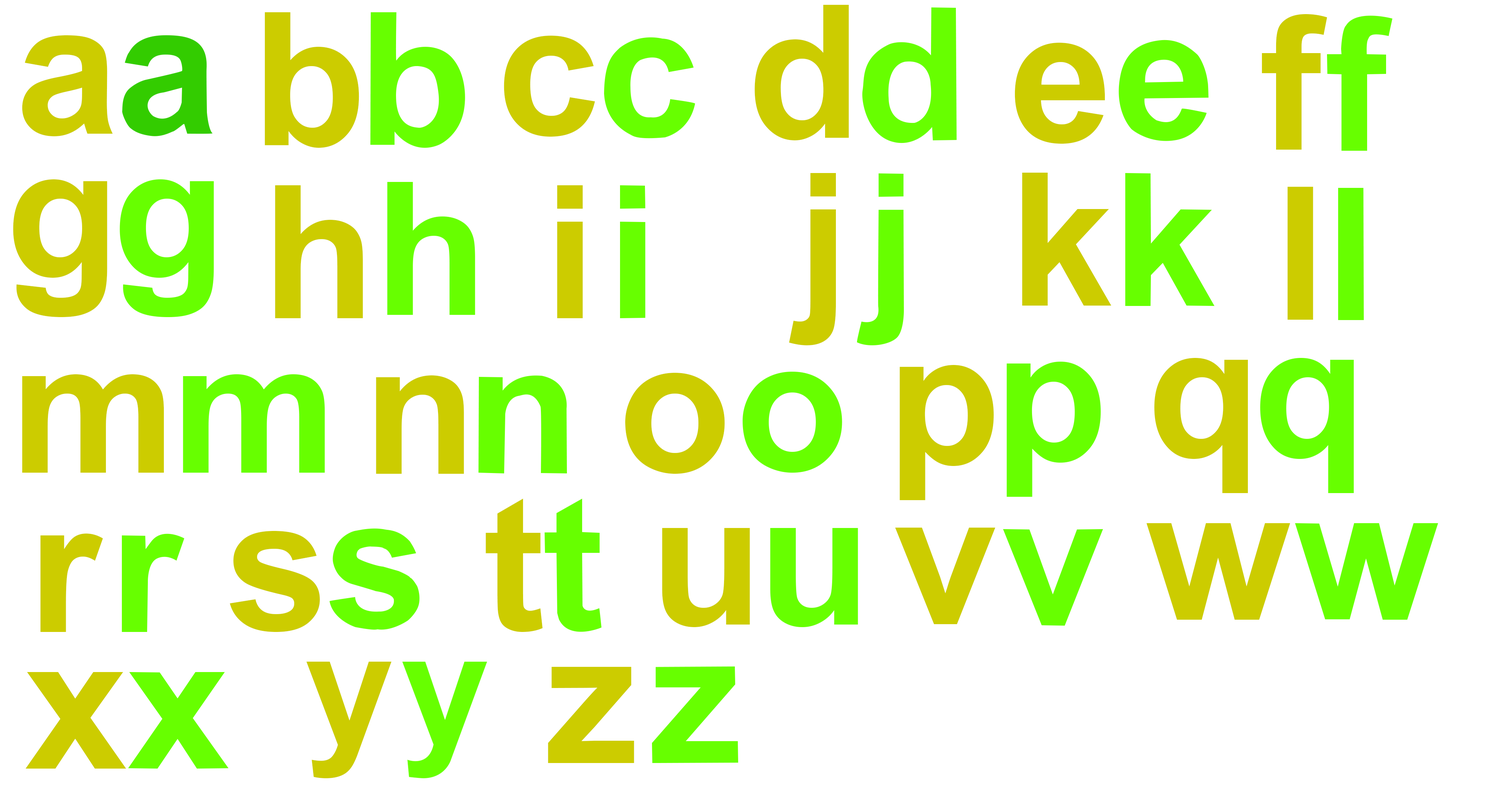
<style>
.page{position:relative;width:1486px;height:802px;background:#ffffff}
.page>*{position:absolute;margin:0}
.t1{font:185.8px "Arial-BoldMT";color:#cccc00}
.t2{font:159.2px "Arial-BoldMT";color:#cccc00}
.t3{font:185.5px "Arial-BoldMT";color:#cccc00}
</style>
<div class="page">
<p class="t1" style="left:755px;top:5px;width:94px;height:135px">d</p>
<p class="t1" style="left:265px;top:12px;width:94px;height:136px">b</p>
<p class="t1" style="left:1262px;top:14px;width:65px;height:136px">f</p>
<p class="t1" style="left:22px;top:35px;width:91px;height:101px">a</p>
<p class="t1" style="left:504px;top:36px;width:91px;height:101px">c</p>
<p class="t1" style="left:1015px;top:43px;width:90px;height:101px">e</p>
<p class="t1" style="left:789px;top:173px;width:47px;height:172px">j</p>
<p class="t1" style="left:1022px;top:173px;width:90px;height:133px">k</p>
<p class="t1" style="left:13px;top:179px;width:94px;height:138px">g</p>
<p class="t1" style="left:275px;top:185px;width:88px;height:133px">h</p>
<p class="t1" style="left:557px;top:185px;width:26px;height:133px">i</p>
<p class="t1" style="left:1287px;top:187px;width:26px;height:133px">l</p>
<p class="t1" style="left:899px;top:365px;width:95px;height:135px">p</p>
<p class="t1" style="left:1154px;top:358px;width:94px;height:135px">q</p>
<p class="t1" style="left:22px;top:374px;width:142px;height:99px">m</p>
<p class="t1" style="left:376px;top:376px;width:88px;height:98px">n</p>
<p class="t1" style="left:625px;top:373px;width:100px;height:101px">o</p>
<p class="t1" style="left:486px;top:499px;width:57px;height:133px">t</p>
<p class="t1" style="left:40px;top:534px;width:63px;height:98px">r</p>
<p class="t1" style="left:230px;top:531px;width:90px;height:101px">s</p>
<p class="t1" style="left:662px;top:528px;width:88px;height:99px">u</p>
<p class="t1" style="left:895px;top:528px;width:100px;height:96px">v</p>
<p class="t1" style="left:1146px;top:523px;width:144px;height:97px">w</p>
<p class="t2" style="left:306px;top:662px;width:86px;height:117px">y</p>
<p class="t1" style="left:25px;top:672px;width:101px;height:97px">x</p>
<p class="t3" style="left:548px;top:667px;width:86px;height:96px">z</p>
</div>
